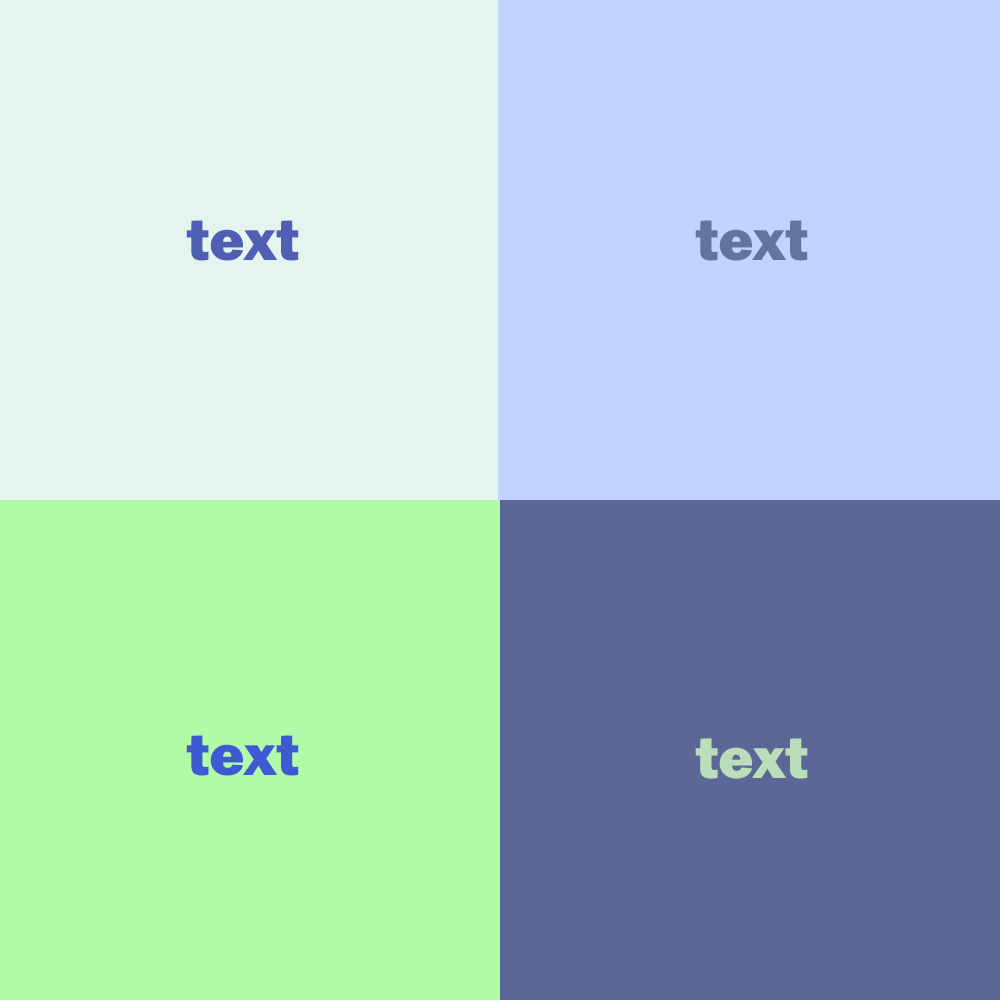
<style>
.page{position:relative;width:1000px;height:1000px;background:#e6f4f1}
.page>*{position:absolute;margin:0}
.t1{font:60px "FranklinGothic-Heavy";color:#4f60b4}
.t2{font:60px "FranklinGothic-Heavy";color:#63749e}
.t3{font:60px "FranklinGothic-Heavy";color:#3d59d3}
.t4{font:60px "FranklinGothic-Heavy";color:#badeb9}
</style>
<div class="page">
<p class="t1" style="left:186px;top:220px;width:113px;height:41px">text</p>
<p class="t2" style="left:695px;top:220px;width:113px;height:41px">text</p>
<p class="t3" style="left:186px;top:735px;width:113px;height:41px">text</p>
<p class="t4" style="left:695px;top:738px;width:113px;height:41px">text</p>
</div>
